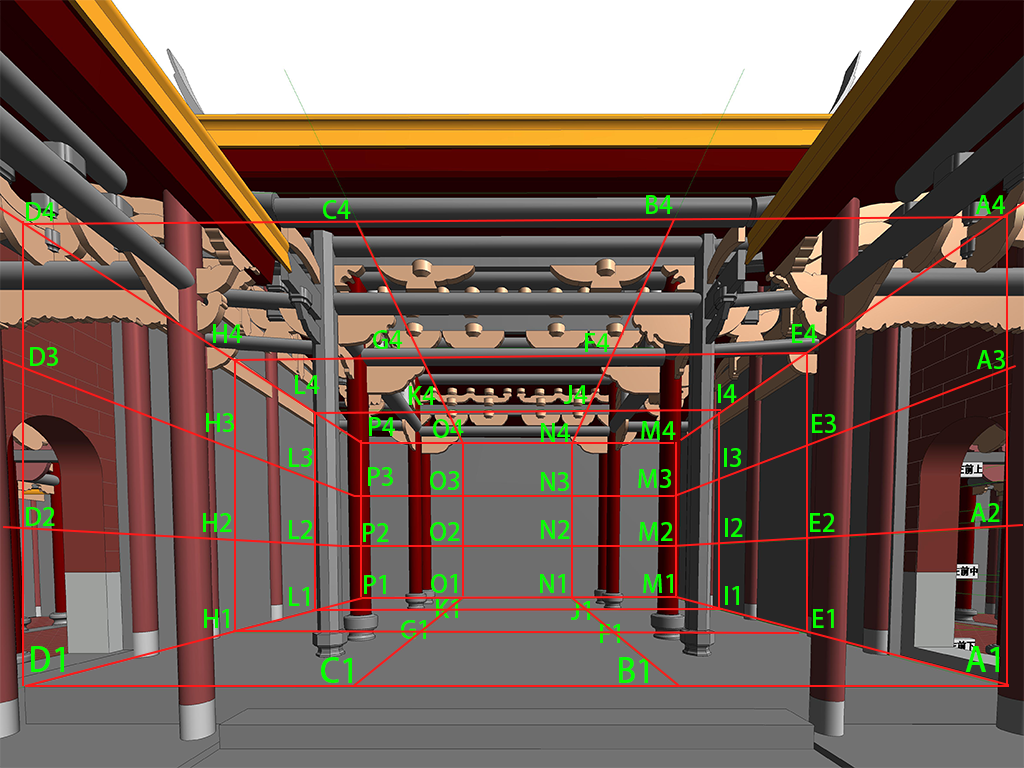
<style>
.page{position:relative;width:1024px;height:768px}
.page>*{position:absolute;margin:0}
.t1{font:25px "AdobeFanHeitiStd-Bold";color:#06ff00}
.t2{font:33.3px "AdobeFanHeitiStd-Bold";color:#06ff00}
</style>
<div class="page">
<p class="t1" style="left:646px;top:195px;width:27px;height:19px">B4</p>
<p class="t1" style="left:975px;top:195px;width:30px;height:19px">A4</p>
<p class="t1" style="left:26px;top:202px;width:29px;height:19px">D4</p>
<p class="t1" style="left:323px;top:200px;width:28px;height:19px">C4</p>
<p class="t1" style="left:213px;top:324px;width:29px;height:19px">H4</p>
<p class="t1" style="left:792px;top:324px;width:25px;height:19px">E4</p>
<p class="t1" style="left:373px;top:330px;width:30px;height:19px">G4</p>
<p class="t1" style="left:585px;top:333px;width:25px;height:19px">F4</p>
<p class="t1" style="left:30px;top:347px;width:28px;height:19px">D3</p>
<p class="t1" style="left:976px;top:350px;width:29px;height:19px">A3</p>
<p class="t1" style="left:295px;top:375px;width:25px;height:19px">L4</p>
<p class="t1" style="left:409px;top:386px;width:27px;height:19px">K4</p>
<p class="t1" style="left:564px;top:385px;width:24px;height:19px">J4</p>
<p class="t1" style="left:718px;top:384px;width:19px;height:19px">I4</p>
<p class="t1" style="left:206px;top:413px;width:28px;height:19px">H3</p>
<p class="t1" style="left:812px;top:414px;width:24px;height:19px">E3</p>
<p class="t1" style="left:369px;top:417px;width:26px;height:19px">P4</p>
<p class="t1" style="left:433px;top:419px;width:31px;height:19px">O4</p>
<p class="t1" style="left:541px;top:423px;width:29px;height:19px">N4</p>
<p class="t1" style="left:641px;top:421px;width:35px;height:19px">M4</p>
<p class="t1" style="left:289px;top:448px;width:23px;height:19px">L3</p>
<p class="t1" style="left:724px;top:448px;width:17px;height:19px">I3</p>
<p class="t1" style="left:368px;top:467px;width:25px;height:19px">P3</p>
<p class="t1" style="left:430px;top:471px;width:29px;height:19px">O3</p>
<p class="t1" style="left:541px;top:472px;width:28px;height:19px">N3</p>
<p class="t1" style="left:638px;top:469px;width:33px;height:19px">M3</p>
<p class="t1" style="left:26px;top:507px;width:29px;height:19px">D2</p>
<p class="t1" style="left:970px;top:503px;width:30px;height:19px">A2</p>
<p class="t1" style="left:203px;top:513px;width:29px;height:19px">H2</p>
<p class="t1" style="left:289px;top:520px;width:24px;height:19px">L2</p>
<p class="t1" style="left:541px;top:520px;width:29px;height:19px">N2</p>
<p class="t1" style="left:725px;top:518px;width:18px;height:19px">I2</p>
<p class="t1" style="left:810px;top:513px;width:25px;height:19px">E2</p>
<p class="t1" style="left:363px;top:523px;width:26px;height:19px">P2</p>
<p class="t1" style="left:430px;top:522px;width:30px;height:19px">O2</p>
<p class="t1" style="left:639px;top:522px;width:34px;height:19px">M2</p>
<p class="t1" style="left:364px;top:575px;width:22px;height:19px">P1</p>
<p class="t1" style="left:431px;top:574px;width:26px;height:19px">O1</p>
<p class="t1" style="left:540px;top:574px;width:25px;height:19px">N1</p>
<p class="t1" style="left:643px;top:574px;width:30px;height:19px">M1</p>
<p class="t1" style="left:289px;top:587px;width:20px;height:19px">L1</p>
<p class="t1" style="left:725px;top:586px;width:14px;height:19px">I1</p>
<p class="t1" style="left:436px;top:599px;width:22px;height:19px">K1</p>
<p class="t1" style="left:571px;top:601px;width:19px;height:19px">J1</p>
<p class="t1" style="left:204px;top:609px;width:25px;height:19px">H1</p>
<p class="t1" style="left:813px;top:609px;width:21px;height:19px">E1</p>
<p class="t1" style="left:401px;top:620px;width:25px;height:19px">G1</p>
<p class="t1" style="left:600px;top:624px;width:20px;height:19px">F1</p>
<p class="t2" style="left:31px;top:646px;width:33px;height:26px">D1</p>
<p class="t2" style="left:965px;top:646px;width:34px;height:26px">A1</p>
<p class="t2" style="left:321px;top:657px;width:31px;height:26px">C1</p>
<p class="t2" style="left:619px;top:657px;width:29px;height:26px">B1</p>
</div>
